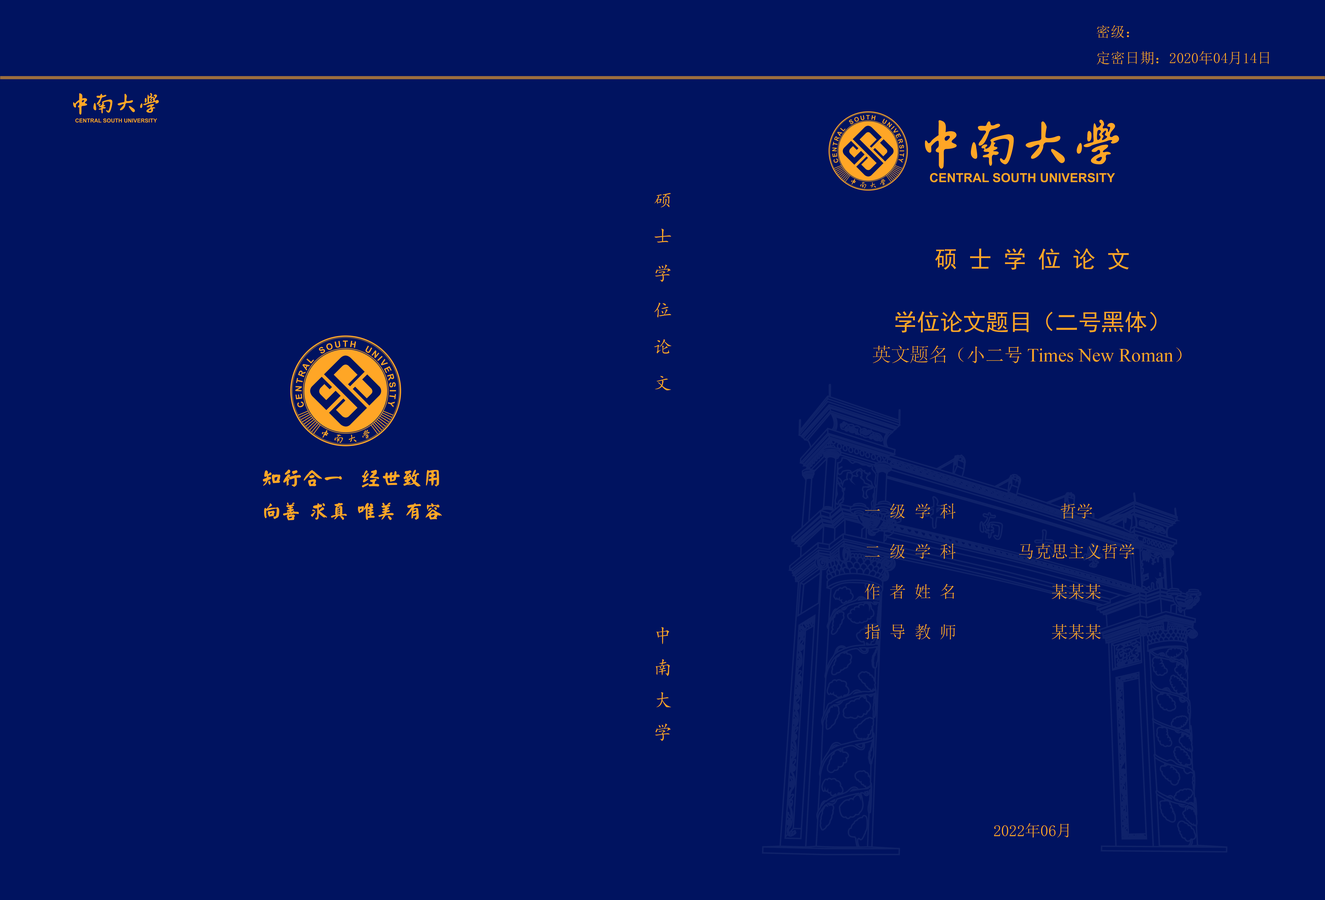
<style>
.page{position:relative;width:1325px;height:900px;background:#001360}
.page>*{position:absolute;margin:0}
.t1{font:14.7px/26.2px "SimSun";color:#ffa626}
.t2{font:23px/31.4px "SimHei";color:#ffa626}
.t3{font:18.9px/31.4px "AdobeSongStd-Light";color:#ffa626}
.t4{font:18.9px/31.4px "SimSun";color:#ffa626}
.t5{font:18.9px/31.4px "TimesNewRomanPSMT";color:#ffa626}
.t6{font:16.8px "SimSun";color:#ffa626}
.t7{font:15.7px "SimSun";color:#ffa626}
</style>
<div class="page">
<p class="t1" style="left:1096px;top:25px;width:173px;height:40px">密级：<br>定密日期：2020年04月14日</p>
<p class="t2" style="left:872px;top:248px;width:309px;height:115px;text-align:center">硕 士 学 位 论 文<br><br>学位论文题目（二号黑体）<br><span class="t3">英文题名</span><span class="t4">（小二号</span><span class="t5"> Times New Roman</span><span class="t4">）</span></p>
<p class="t6" style="left:865px;top:503px;width:91px;height:137px">一 级 学 科<br>     <br>二 级 学 科   <br>    <br>作 者 姓 名   <br>        <br>指 导 教 师</p>
<p class="t6" style="left:1019px;top:503px;width:115px;height:137px;text-align:center">哲学<br>     <br>马克思主义哲学 <br>    <br>某某某<br>        <br>某某某</p>
<p class="t7" style="left:994px;top:823px;width:75px;height:15px">2022年06月</p>
</div>
